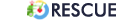
<style>
.page{position:relative;width:139px;height:21px;background:#ffffff}
.page>*{position:absolute;margin:0}
.t1{font:18.2px "FuturaBT-Medium";color:#21243d}
</style>
<div class="page">
<p class="t1" style="left:52px;top:3px;width:64px;height:14px">RESCUE</p>
</div>
